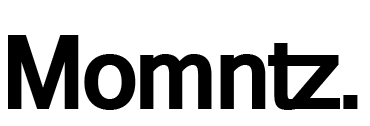
<style>
.page{position:relative;width:370px;height:126px;background:#ffffff}
.page>*{position:absolute;margin:0}
.t1{font:100px "Mangal-Bold";letter-spacing:-0.075em;color:#000000}
</style>
<div class="page">
<p class="t1" style="left:8px;top:35px;width:350px;height:75px">Momntz.</p>
</div>
